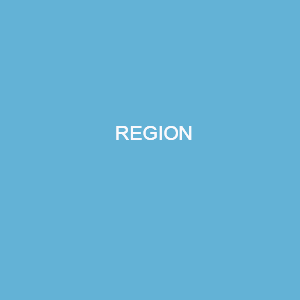
<style>
.page{position:relative;width:300px;height:300px;background:#63b2d6}
.page>*{position:absolute;margin:0}
.t1{font:30px "CordiaUPC-Bold";color:#faf9fc}
</style>
<div class="page">
<p class="t1" style="left:116px;top:126px;width:76px;height:14px">REGION</p>
<p class="t1" style="left:116px;top:126px;width:76px;height:14px">REGION</p>
</div>
